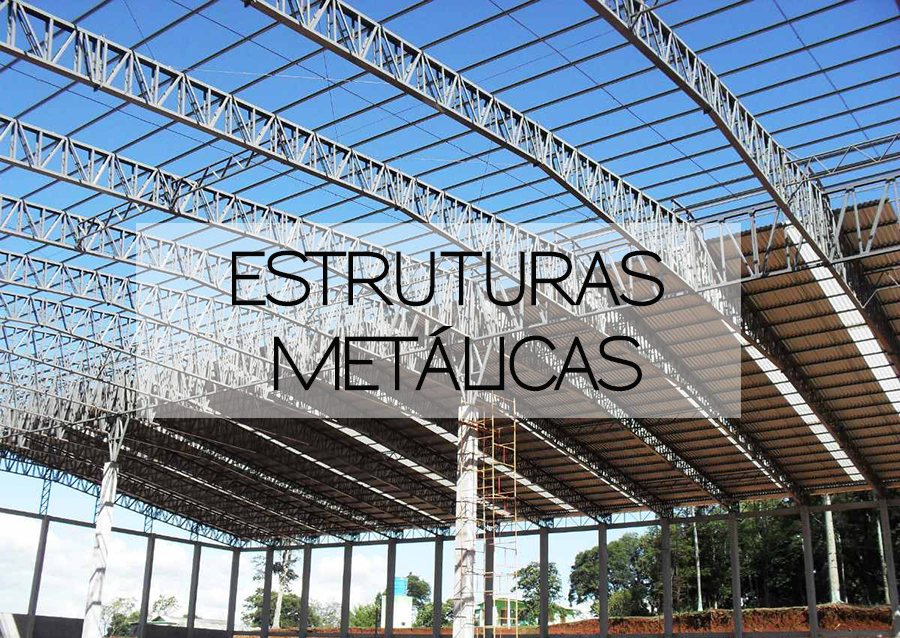
<style>
.page{position:relative;width:900px;height:638px}
.page>*{position:absolute;margin:0}
.t1{font:70.9px "Sansumi-Bold";letter-spacing:-0.05em;color:#070707;scale:0.9 1}
</style>
<div class="page">
<p class="t1" style="left:232px;top:250px;width:432px;height:142px;text-align:center">ESTRUTURAS<br>METÁLICAS</p>
</div>
